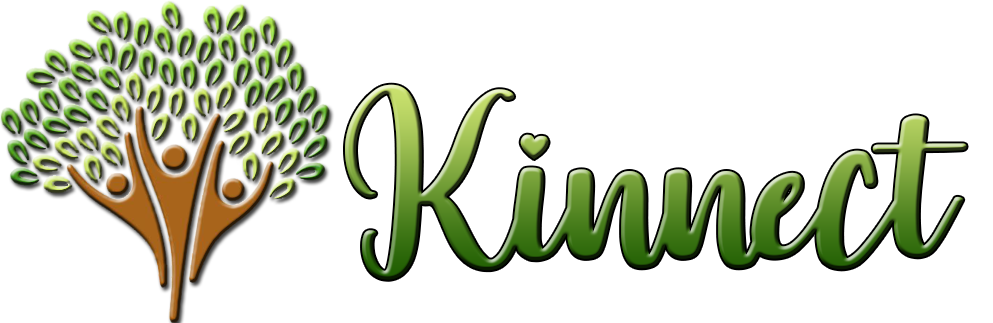
<style>
.page{position:relative;width:993px;height:323px;background:#ffffff}
.page>*{position:absolute;margin:0}
.t1{font:266.7px "FamilyHome"}
</style>
<div class="page">
<p class="t1" style="left:345px;top:84px;width:622px;height:196px">Kinnect</p>
</div>
